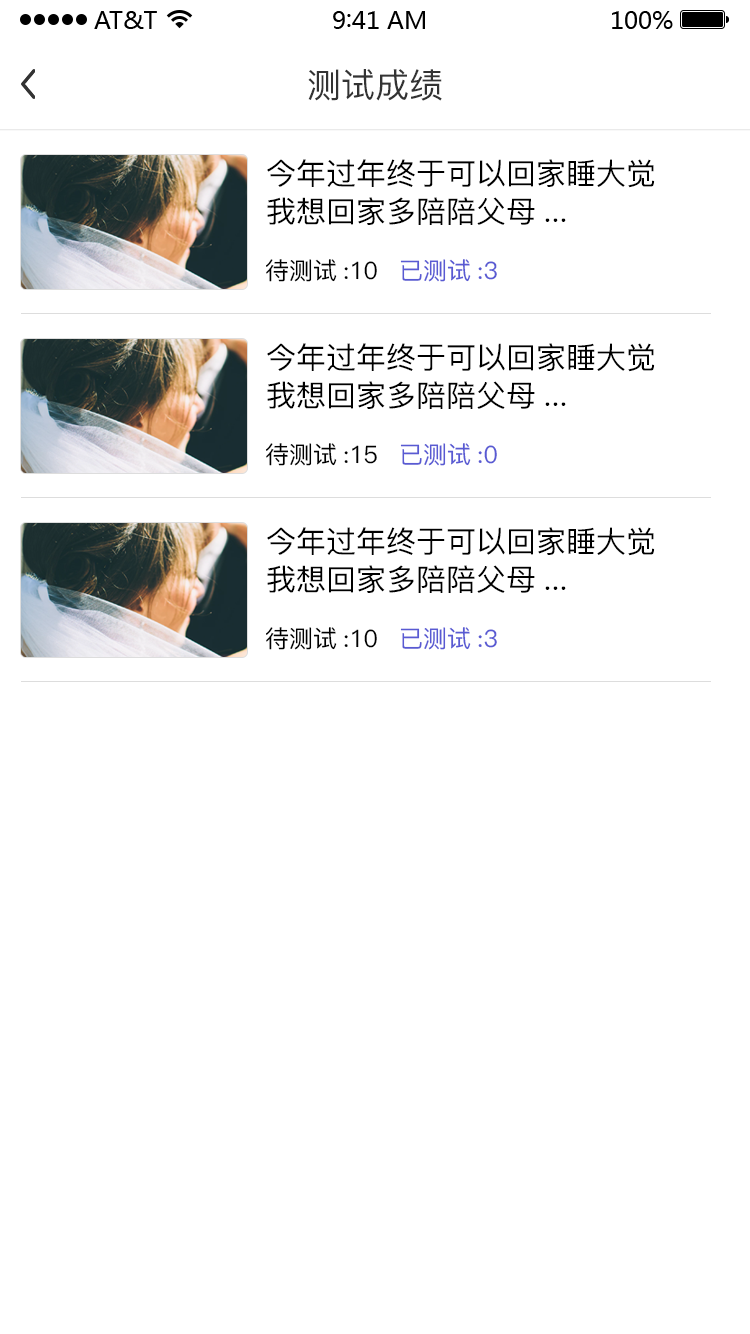
<style>
.page{position:relative;width:750px;height:1334px;background:#ffffff}
.page>*{position:absolute;margin:0}
.t1{font:34px "PingFang-SC-Medium";color:#333333}
.t2{font:30px/38px "PingFang-SC-Medium";color:#000000}
.t3{font:24px "PingFang-SC-Medium";color:#000000}
.t4{font:24px "PingFang-SC-Medium";color:#595ad3}
</style>
<div class="page">
<p class="t1" style="left:308px;top:69px;width:134px;height:32px">测试成绩</p>
<p class="t2" style="left:267px;top:159px;width:388px;height:66px">今年过年终于可以回家睡大觉<br>我想回家多陪陪父母...</p>
<p class="t3" style="left:266px;top:259px;width:111px;height:23px">待测试:10</p>
<p class="t4" style="left:400px;top:259px;width:97px;height:23px">已测试:3</p>
<p class="t2" style="left:267px;top:343px;width:388px;height:66px">今年过年终于可以回家睡大觉<br>我想回家多陪陪父母...</p>
<p class="t3" style="left:266px;top:443px;width:111px;height:23px">待测试:15</p>
<p class="t4" style="left:400px;top:443px;width:97px;height:23px">已测试:0</p>
<p class="t2" style="left:267px;top:527px;width:388px;height:66px">今年过年终于可以回家睡大觉<br>我想回家多陪陪父母...</p>
<p class="t3" style="left:266px;top:627px;width:111px;height:23px">待测试:10</p>
<p class="t4" style="left:400px;top:627px;width:97px;height:23px">已测试:3</p>
</div>
